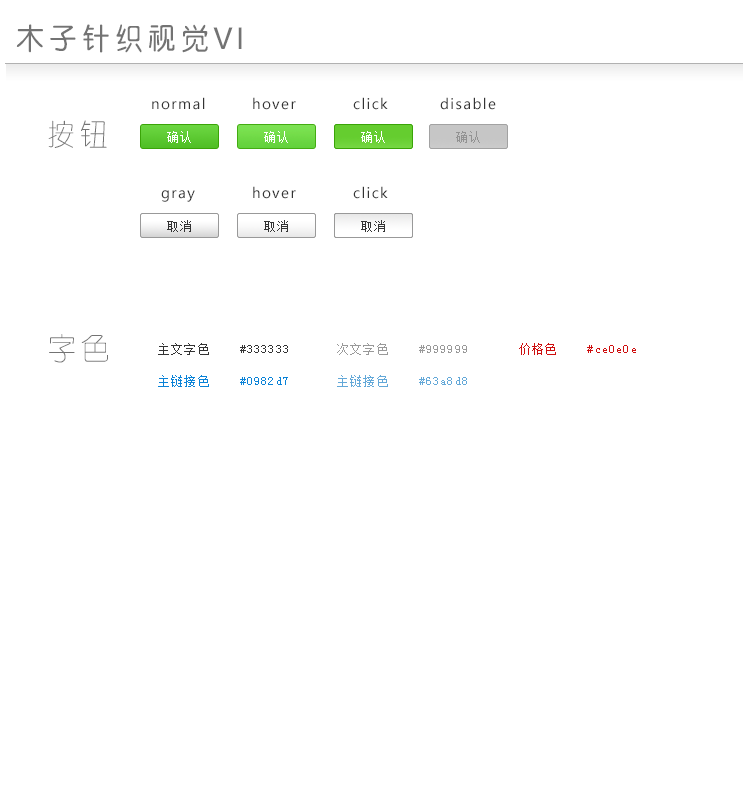
<style>
.page{position:relative;width:750px;height:800px;background:#ffffff}
.page>*{position:absolute;margin:0}
.t1{font:30px "CTZhongYuanSJ";letter-spacing:0.1em;color:#737373}
.t2{font:14px "MicrosoftYaHei";letter-spacing:0.1em;color:#333333}
.t3{font:30px "CTXiYuanSJ";letter-spacing:0.1em;color:#737373}
.t4{font:12px "SimSun";letter-spacing:0.1em;color:#fefefe}
.t5{font:12px "SimSun";letter-spacing:0.1em;color:#929292}
.t6{font:12px "SimSun";letter-spacing:0.1em;color:#333333}
.t7{font:12px "SimSun";letter-spacing:0.1em;color:#999999}
.t8{font:12px "SimSun";letter-spacing:0.1em;color:#ce0e0e}
.t9{font:12px "SimSun";letter-spacing:0.1em;color:#0982d7}
.t10{font:12px "SimSun";letter-spacing:0.1em;color:#63a8d8}
</style>
<div class="page">
<p class="t1" style="left:16px;top:24px;width:226px;height:29px">木子针织视觉VI</p>
<p class="t2" style="left:152px;top:97px;width:53px;height:13px">normal</p>
<p class="t2" style="left:253px;top:97px;width:43px;height:13px">hover</p>
<p class="t2" style="left:353px;top:97px;width:35px;height:13px">click</p>
<p class="t2" style="left:440px;top:97px;width:56px;height:13px">disable</p>
<p class="t3" style="left:48px;top:120px;width:59px;height:28px">按钮</p>
<p class="t4" style="left:167px;top:131px;width:24px;height:12px">确认</p>
<p class="t4" style="left:264px;top:131px;width:24px;height:12px">确认</p>
<p class="t4" style="left:361px;top:131px;width:24px;height:12px">确认</p>
<p class="t5" style="left:456px;top:131px;width:24px;height:12px">确认</p>
<p class="t2" style="left:161px;top:190px;width:34px;height:12px">gray</p>
<p class="t2" style="left:253px;top:186px;width:43px;height:13px">hover</p>
<p class="t2" style="left:353px;top:186px;width:35px;height:13px">click</p>
<p class="t6" style="left:167px;top:220px;width:24px;height:12px">取消</p>
<p class="t6" style="left:264px;top:220px;width:24px;height:12px">取消</p>
<p class="t6" style="left:361px;top:220px;width:24px;height:12px">取消</p>
<p class="t3" style="left:49px;top:334px;width:59px;height:29px">字色</p>
<p class="t6" style="left:158px;top:343px;width:130px;height:12px">主文字色    #333333</p>
<p class="t7" style="left:337px;top:343px;width:130px;height:12px">次文字色    #999999</p>
<p class="t8" style="left:519px;top:343px;width:117px;height:12px">价格色    #ce0e0e</p>
<p class="t9" style="left:158px;top:375px;width:130px;height:12px">主链接色    #0982d7</p>
<p class="t10" style="left:337px;top:375px;width:130px;height:12px">主链接色    #63a8d8</p>
</div>
